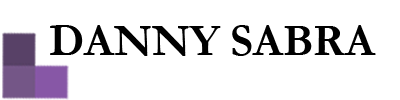
<style>
.page{position:relative;width:400px;height:100px;background:#ffffff}
.page>*{position:absolute;margin:0}
.t1{font:45px "Garamond-Bold";color:#000000}
</style>
<div class="page">
<p class="t1" style="left:50px;top:25px;width:326px;height:31px">DANNY SABRA</p>
</div>
